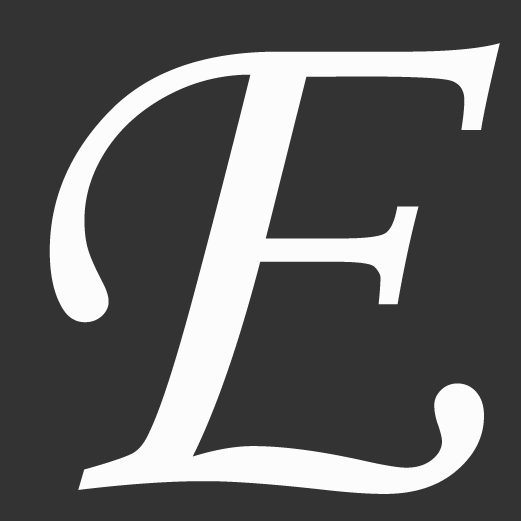
<style>
.page{position:relative;width:521px;height:521px;background:#333333}
.page>*{position:absolute;margin:0}
.t1{font:750px "MonotypeCorsiva";color:#fdfcfc}
</style>
<div class="page">
<p class="t1" style="left:49px;top:43px;width:451px;height:451px">E</p>
</div>
